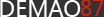
<style>
.page{position:relative;width:104px;height:17px;background:#333333}
.page>*{position:absolute;margin:0}
.t1{font:22px "MicrosoftYaHei";color:#ffffff}
.t2{font:22px "MicrosoftYaHei";color:#d12610;scale:0.96 1}
</style>
<div class="page">
<p class="t1" style="left:0px;top:0px;width:81px;height:17px">DEMAO</p>
<p class="t2" style="left:81px;top:0px;width:23px;height:16px">87</p>
</div>
